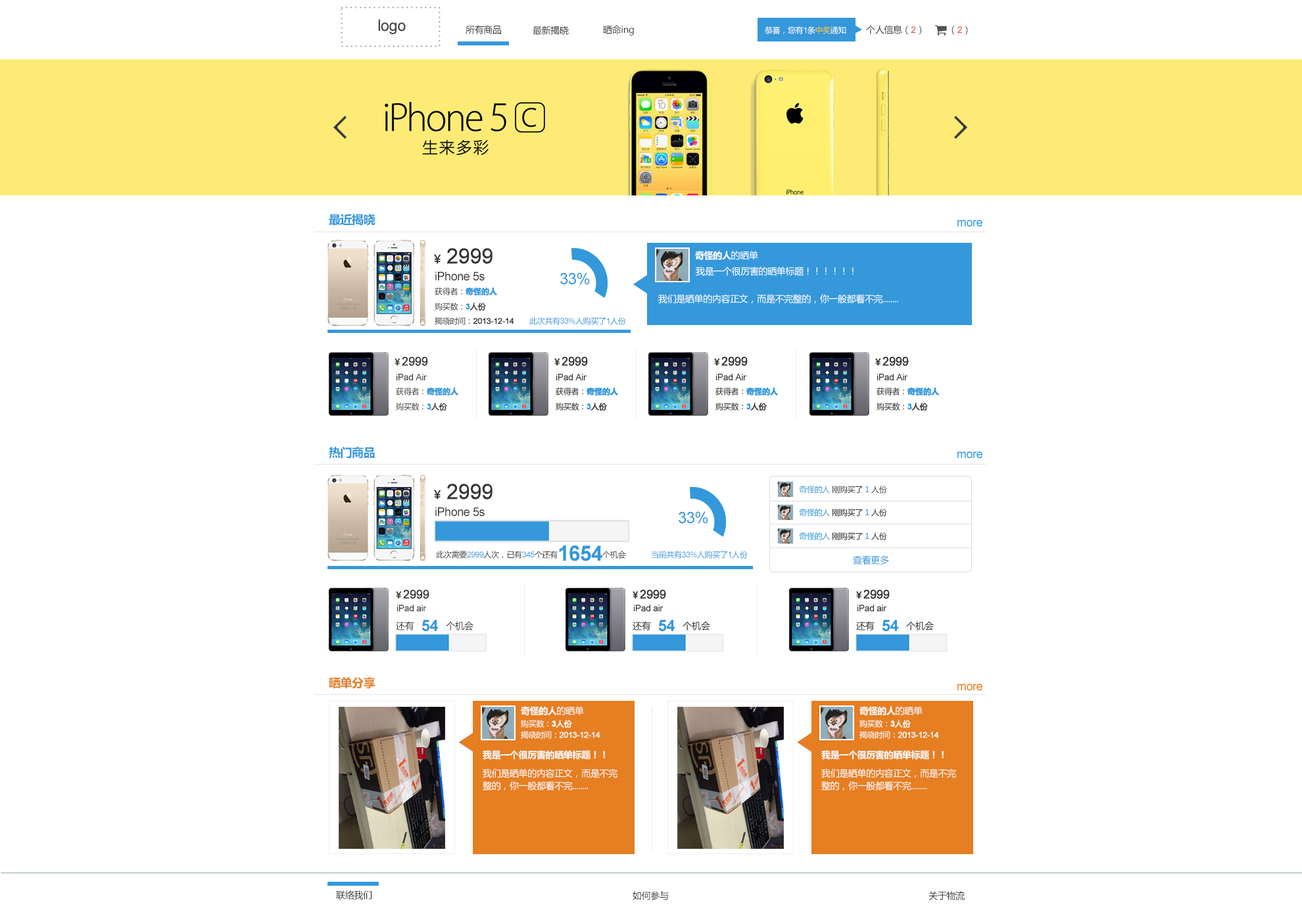
<style>
.page{position:relative;width:1302px;height:916px;background:#ffffff}
.page>*{position:absolute;margin:0}
.t1{font:9.2px "MicrosoftYaHei";letter-spacing:-0.025em;color:#333333}
.t2{font:7.9px "MicrosoftYaHei";letter-spacing:-0.025em;color:#ffffff}
.t3{font:7.9px "ArialMT";letter-spacing:-0.025em;color:#ffffff}
.t4{font:7.9px "MicrosoftYaHei";letter-spacing:-0.025em;color:#f1c619}
.t5{font:9.2px "ArialMT";letter-spacing:-0.025em;color:#e74c3c}
.t6{font:11.8px "MicrosoftYaHei-Bold";letter-spacing:-0.025em;color:#3498db}
.t7{font:21px "ArialMT";letter-spacing:-0.025em;color:#333333;font-weight:bold}
.t8{font:11.8px "MicrosoftYaHei";letter-spacing:-0.025em;color:#333333;font-weight:bold}
.t9{font:9.2px "MicrosoftYaHei-Bold";letter-spacing:-0.025em;color:#ffffff}
.t10{font:9.2px "MicrosoftYaHei";letter-spacing:-0.025em;color:#ffffff}
.t11{font:11.8px "ArialMT";letter-spacing:-0.025em;color:#333333}
.t12{font:15.8px "ArialMT";letter-spacing:-0.025em;color:#3498db}
.t13{font:7.9px "MicrosoftYaHei";letter-spacing:-0.025em;color:#333333}
.t14{font:7.9px "MicrosoftYaHei-Bold";letter-spacing:-0.025em;color:#3498db;font-weight:bold}
.t15{font:7.9px "Arial-BoldMT";letter-spacing:-0.025em;color:#3498db;font-weight:bold}
.t16{font:7.9px "MicrosoftYaHei";letter-spacing:-0.025em;color:#333333;font-weight:bold}
.t17{font:7.9px "ArialMT";letter-spacing:-0.025em;color:#333333;font-weight:bold}
.t18{font:7.9px "MicrosoftYaHei";letter-spacing:-0.025em;color:#3498db}
.t19{font:7.9px "ArialMT";letter-spacing:-0.025em;color:#3498db}
.t20{font:11.8px "ArialMT";letter-spacing:-0.025em;color:#333333;font-weight:bold}
.t21{font:9.2px "MicrosoftYaHei";letter-spacing:-0.025em;color:#333333;font-weight:bold}
.t22{font:9.2px "ArialMT";letter-spacing:-0.025em;color:#333333}
.t23{font:21px "Arial-BoldMT";letter-spacing:-0.025em;color:#3498db}
.t24{font:9.2px "MicrosoftYaHei";letter-spacing:-0.025em;color:#3498db}
.t25{font:15.8px "Arial-BoldMT";letter-spacing:-0.025em;color:#3498db}
.t26{font:11.8px "MicrosoftYaHei-Bold";letter-spacing:-0.025em;color:#e67e22}
.t27{font:7.9px "Arial-BoldMT";letter-spacing:-0.025em;color:#ffffff;font-weight:bold}
.t28{font:7.9px "MicrosoftYaHei";letter-spacing:-0.025em;color:#ffffff;font-weight:bold}
.t29{font:7.9px "ArialMT";letter-spacing:-0.025em;color:#ffffff;font-weight:bold}
</style>
<div class="page">
<p class="t1" style="left:466px;top:25px;width:35px;height:9px">所有商品</p>
<p class="t1" style="left:533px;top:26px;width:36px;height:9px">最新揭晓</p>
<p class="t1" style="left:603px;top:25px;width:31px;height:11px">晒命ing</p>
<p class="t2" style="left:765px;top:26px;width:82px;height:8px">恭喜，您有<span class="t3">1</span>条<span class="t4">中奖</span>通知</p>
<p class="t1" style="left:866px;top:25px;width:56px;height:10px">个人信息（<span class="t5">2</span>）</p>
<p class="t1" style="left:952px;top:26px;width:16px;height:9px">（<span class="t5">2</span>）</p>
<p class="t6" style="left:329px;top:214px;width:47px;height:12px">最近揭晓</p>
<p class="t7" style="left:434px;top:248px;width:59px;height:16px"><span class="t8">￥ </span>2999</p>
<p class="t9" style="left:695px;top:251px;width:63px;height:9px">奇怪的人<span class="t10">的晒单</span></p>
<p class="t10" style="left:696px;top:266px;width:158px;height:10px">我是一个很厉害的晒单标题！！！！！！</p>
<p class="t11" style="left:435px;top:272px;width:50px;height:9px">iPhone 5s</p>
<p class="t12" style="left:560px;top:272px;width:30px;height:13px">33%</p>
<p class="t13" style="left:435px;top:287px;width:62px;height:8px">获得者：<span class="t14">奇怪的人</span></p>
<p class="t13" style="left:435px;top:303px;width:51px;height:7px">购买数：<span class="t15">3</span><span class="t16">人份</span></p>
<p class="t10" style="left:658px;top:294px;width:240px;height:9px">我们是晒单的内容正文，而是不完整的，你一般都看不完........</p>
<p class="t17" style="left:435px;top:317px;width:79px;height:8px"><span class="t13">揭晓时间：</span>2013-12-14</p>
<p class="t18" style="left:529px;top:317px;width:97px;height:8px">此次共有<span class="t19">33%</span>人购买了<span class="t19">1</span>人份</p>
<p class="t20" style="left:395px;top:357px;width:33px;height:9px"><span class="t21">￥</span>2999</p>
<p class="t22" style="left:397px;top:374px;width:30px;height:6px">iPad Air</p>
<p class="t13" style="left:396px;top:387px;width:62px;height:8px">获得者：<span class="t14">奇怪的人</span></p>
<p class="t13" style="left:396px;top:403px;width:51px;height:7px">购买数：<span class="t15">3</span><span class="t16">人份</span></p>
<p class="t6" style="left:329px;top:447px;width:46px;height:11px">热门商品</p>
<p class="t7" style="left:434px;top:483px;width:59px;height:16px"><span class="t8">￥ </span>2999</p>
<p class="t18" style="left:799px;top:485px;width:88px;height:8px">奇怪的人 <span class="t13">刚购买了 </span>1 <span class="t13">人份</span></p>
<p class="t11" style="left:435px;top:507px;width:50px;height:9px">iPhone 5s</p>
<p class="t12" style="left:679px;top:511px;width:29px;height:13px">33%</p>
<p class="t13" style="left:436px;top:545px;width:190px;height:16px">此次需要<span class="t19">2999</span>人次，已有<span class="t19">345</span>个还有<span class="t23">1654</span>个机会</p>
<p class="t18" style="left:651px;top:551px;width:97px;height:7px">当前共有<span class="t19">33%</span>人购买了<span class="t19">1</span>人份</p>
<p class="t24" style="left:853px;top:555px;width:36px;height:9px">查看更多</p>
<p class="t20" style="left:396px;top:589px;width:34px;height:10px"><span class="t21">￥</span>2999</p>
<p class="t22" style="left:397px;top:604px;width:30px;height:7px">iPad air</p>
<p class="t1" style="left:396px;top:620px;width:78px;height:11px">还有 <span class="t25">54  </span>个机会</p>
<p class="t26" style="left:330px;top:676px;width:46px;height:13px">晒单分享</p>
<p class="t9" style="left:521px;top:706px;width:63px;height:9px">奇怪的人<span class="t10">的晒单</span></p>
<p class="t9" style="left:860px;top:706px;width:63px;height:9px">奇怪的人<span class="t10">的晒单</span></p>
<p class="t2" style="left:521px;top:720px;width:51px;height:7px">购买数：<span class="t27">3</span><span class="t28">人份</span></p>
<p class="t2" style="left:860px;top:720px;width:51px;height:7px">购买数：<span class="t27">3</span><span class="t28">人份</span></p>
<p class="t29" style="left:521px;top:731px;width:80px;height:8px"><span class="t2">揭晓时间：</span>2013-12-14</p>
<p class="t29" style="left:860px;top:731px;width:79px;height:8px"><span class="t2">揭晓时间：</span>2013-12-14</p>
<p class="t9" style="left:483px;top:750px;width:122px;height:9px">我是一个很厉害的晒单标题！！</p>
<p class="t9" style="left:822px;top:750px;width:122px;height:9px">我是一个很厉害的晒单标题！！</p>
<p class="t10" style="left:483px;top:768px;width:135px;height:22px">我们是晒单的内容正文，而是不完<br>整的，你一般都看不完........</p>
<p class="t10" style="left:822px;top:768px;width:134px;height:22px">我们是晒单的内容正文，而是不完<br>整的，你一般都看不完........</p>
<p class="t1" style="left:336px;top:890px;width:36px;height:9px">联络我们</p>
<p class="t1" style="left:633px;top:891px;width:36px;height:9px">如何参与</p>
<p class="t1" style="left:929px;top:891px;width:36px;height:9px">关于物流</p>
</div>
